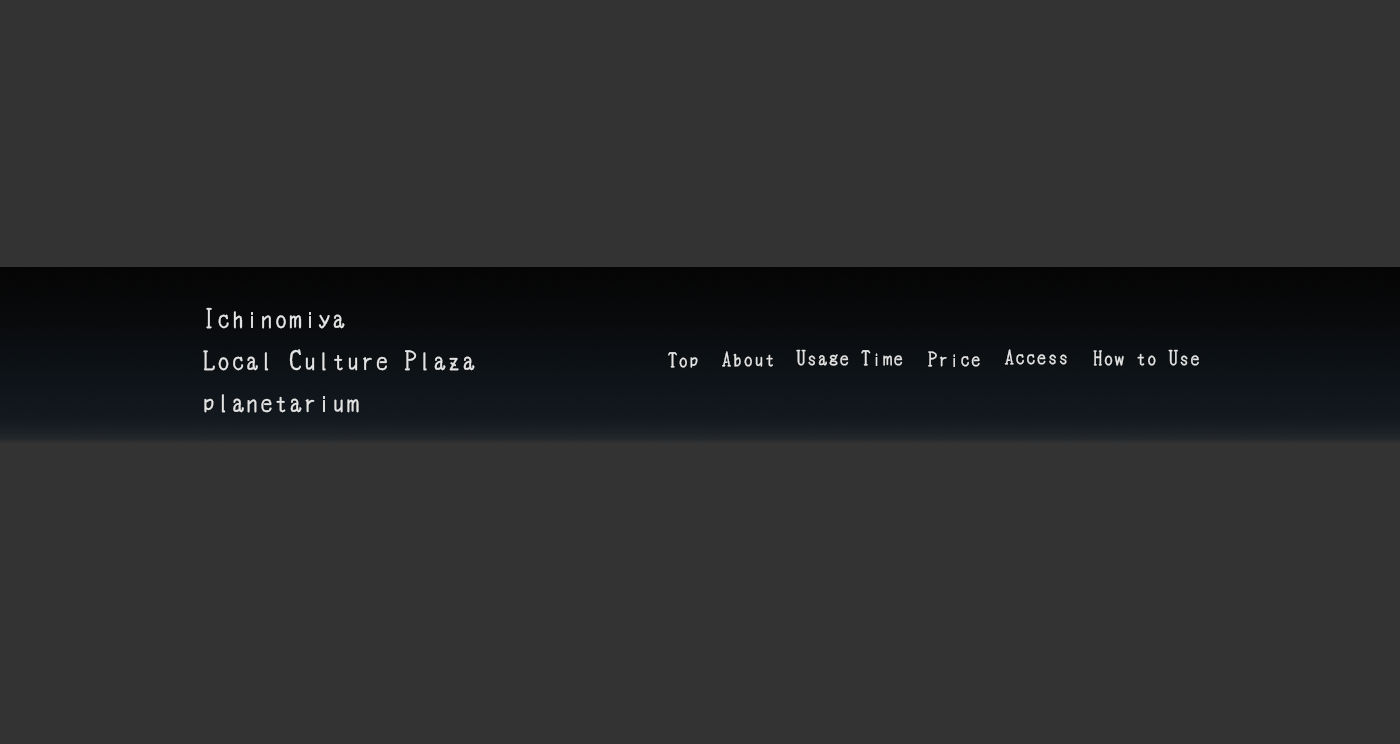
<style>
.page{position:relative;width:1400px;height:744px;background:#333333}
.page>*{position:absolute;margin:0}
.t1{font:24px "cinecaption";letter-spacing:0.1em;color:#e3e3e3}
.t2{font:18px "cinecaption";letter-spacing:0.1em;color:#e3e3e3}
</style>
<div class="page">
<p class="t1" style="left:203px;top:307px;width:272px;height:106px">Ichinomiya<br>Local Culture Plaza<br>planetarium</p>
<p class="t2" style="left:668px;top:352px;width:30px;height:16px">Top</p>
<p class="t2" style="left:722px;top:351px;width:51px;height:16px">About</p>
<p class="t2" style="left:796px;top:349px;width:107px;height:17px">Usage Time</p>
<p class="t2" style="left:928px;top:351px;width:52px;height:16px">Price</p>
<p class="t2" style="left:1004px;top:349px;width:63px;height:16px">Access</p>
<p class="t2" style="left:1093px;top:349px;width:106px;height:17px">How to Use</p>
</div>
